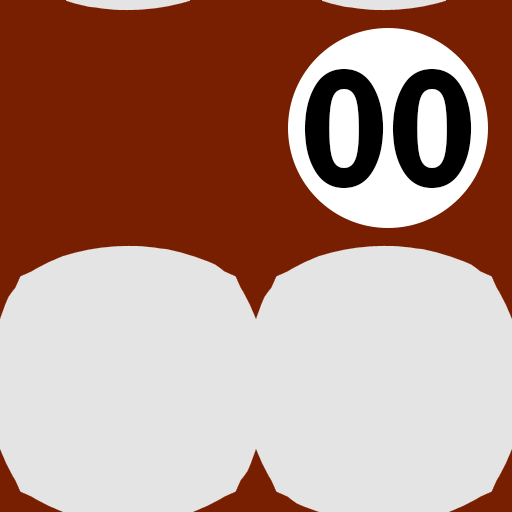
<style>
.page{position:relative;width:512px;height:512px;background:#e4e4e4}
.page>*{position:absolute;margin:0}
.t1{font:172.5px "FranklinGothic-Demi";color:#000000;scale:0.87 1}
</style>
<div class="page">
<p class="t1" style="left:304px;top:69px;width:168px;height:119px">00</p>
</div>
